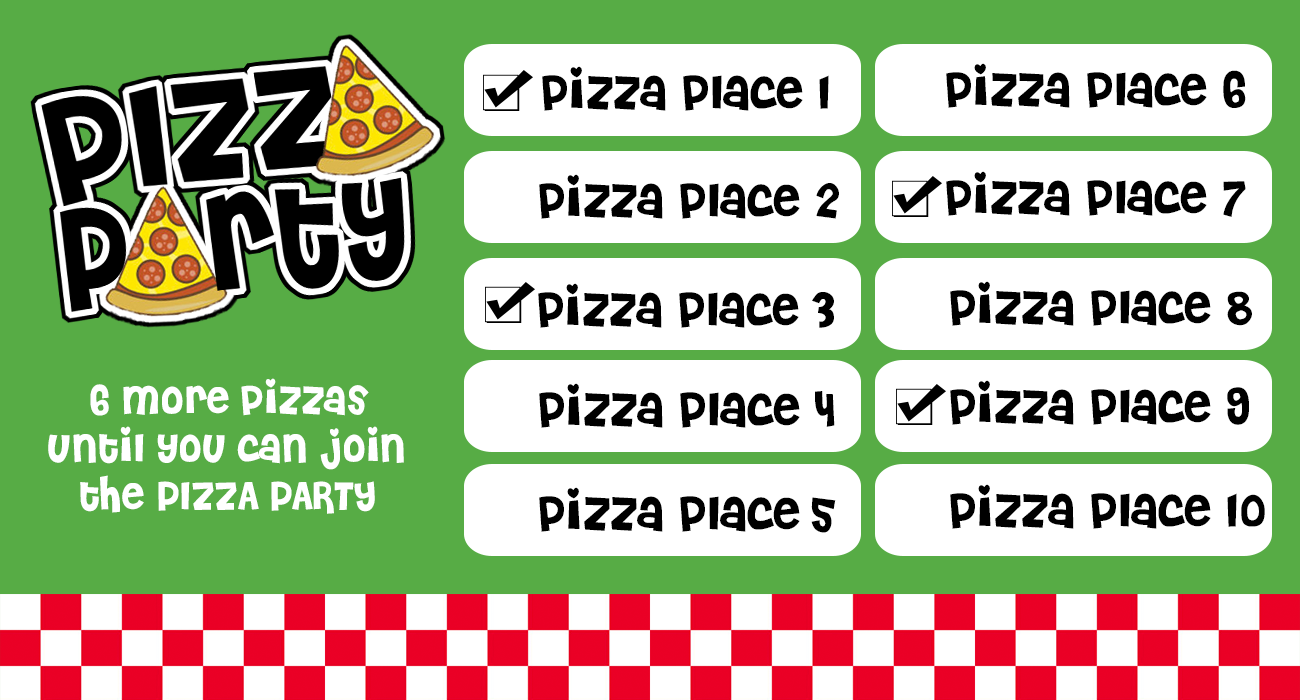
<style>
.page{position:relative;width:1300px;height:700px;background:#ffffff}
.page>*{position:absolute;margin:0}
.t1{font:48px "Cheri";color:#000000}
.t2{font:40px "Cheri";color:#ffffff}
</style>
<div class="page">
<p class="t1" style="left:946px;top:63px;width:300px;height:45px">pizza place 6</p>
<p class="t1" style="left:542px;top:66px;width:287px;height:45px">pizza place 1</p>
<p class="t1" style="left:539px;top:174px;width:300px;height:45px">pizza place 2</p>
<p class="t1" style="left:946px;top:171px;width:300px;height:46px">pizza place 7</p>
<p class="t1" style="left:950px;top:281px;width:302px;height:45px">pizza place 8</p>
<p class="t1" style="left:538px;top:283px;width:296px;height:45px">pizza place 3</p>
<p class="t2" style="left:48px;top:378px;width:356px;height:136px;text-align:center">6 more pizzas<br>until you can join the PIZZA PARTY</p>
<p class="t1" style="left:539px;top:383px;width:296px;height:45px">pizza place 4</p>
<p class="t1" style="left:950px;top:380px;width:299px;height:45px">pizza place 9</p>
<p class="t1" style="left:950px;top:484px;width:315px;height:45px">pizza place 10</p>
<p class="t1" style="left:539px;top:487px;width:297px;height:46px">pizza place 5</p>
</div>
